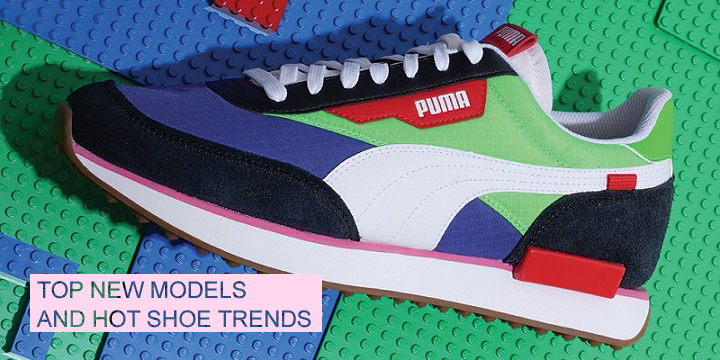
<style>
.page{position:relative;width:720px;height:360px}
.page>*{position:absolute;margin:0}
.t1{font:23px/29px "ArialMT";text-transform:uppercase}
</style>
<div class="page">
<p class="t1" style="left:36px;top:281px;width:275px;height:47px">top new models <br>and hot shoe trends</p>
</div>
